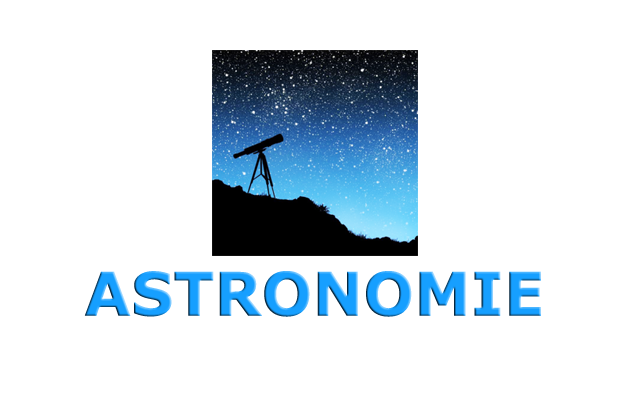
<style>
.page{position:relative;width:629px;height:404px;background:#ffffff}
.page>*{position:absolute;margin:0}
.t1{font:60px "Verdana-Bold";color:#169fff}
</style>
<div class="page">
<p class="t1" style="left:84px;top:271px;width:457px;height:46px">ASTRONOMIE</p>
</div>
